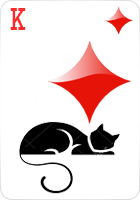
<style>
.page{position:relative;width:140px;height:200px;background:#ffffff}
.page>*{position:absolute;margin:0}
.t1{font:26px "CardCharacters";color:#ff2b2b}
</style>
<div class="page">
<p class="t1" style="left:10px;top:8px;width:16px;height:22px">K</p>
</div>
